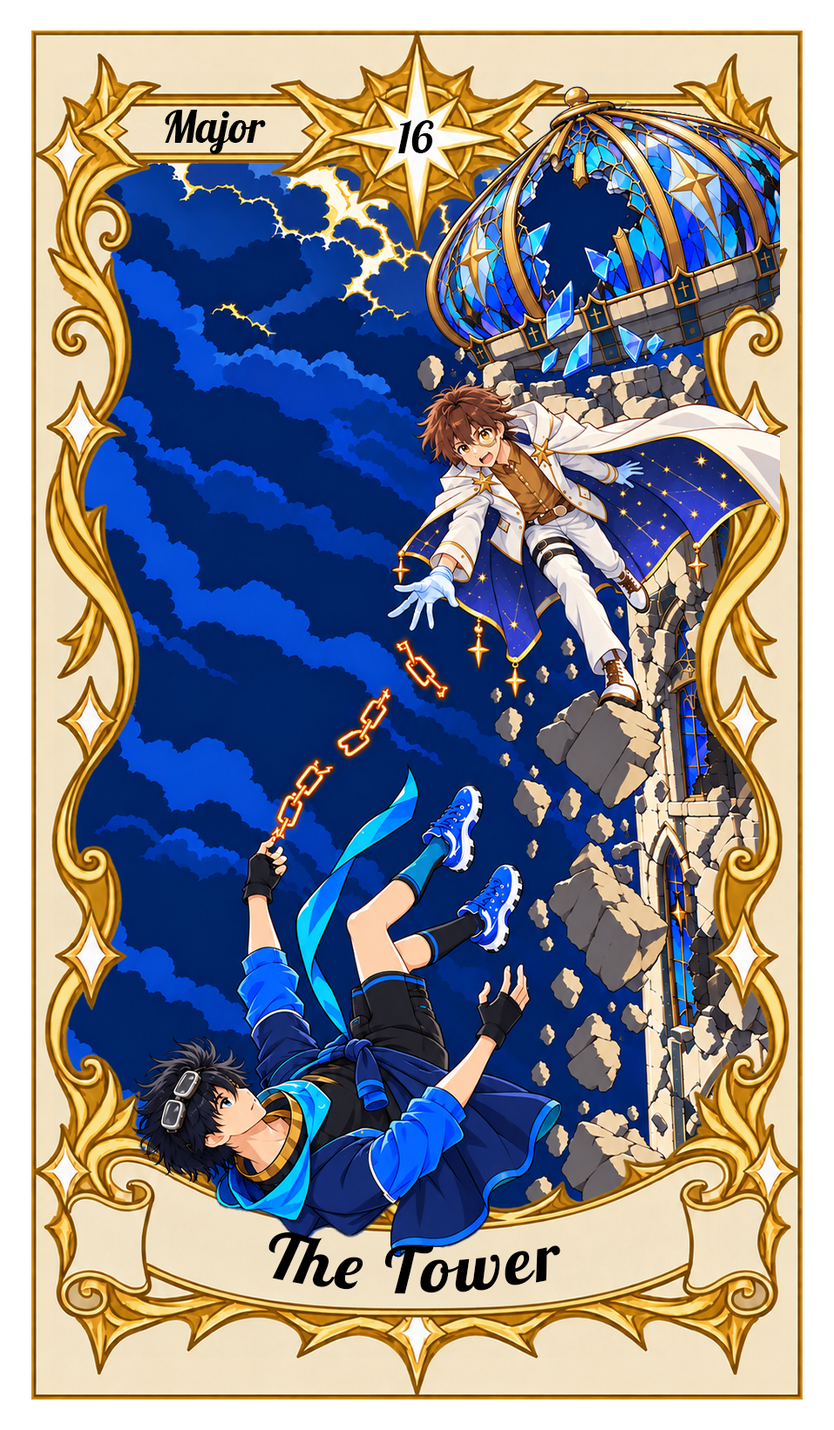
<style>
.page{position:relative;width:834px;height:1430px}
.page>*{position:absolute;margin:0}
.t1{font:43.6px "Lobster-Regular";color:#000000}
.t2{font:65.3px "Lobster-Regular";letter-spacing:0.05em;color:#000000}
</style>
<div class="page">
<p class="t1" style="left:165px;top:110px;width:101px;height:44px">Major</p>
<p class="t1" style="left:398px;top:120px;width:36px;height:33px">16</p>
<p class="t2" style="left:268px;top:1233px;width:292px;height:61px">The Tower</p>
</div>
